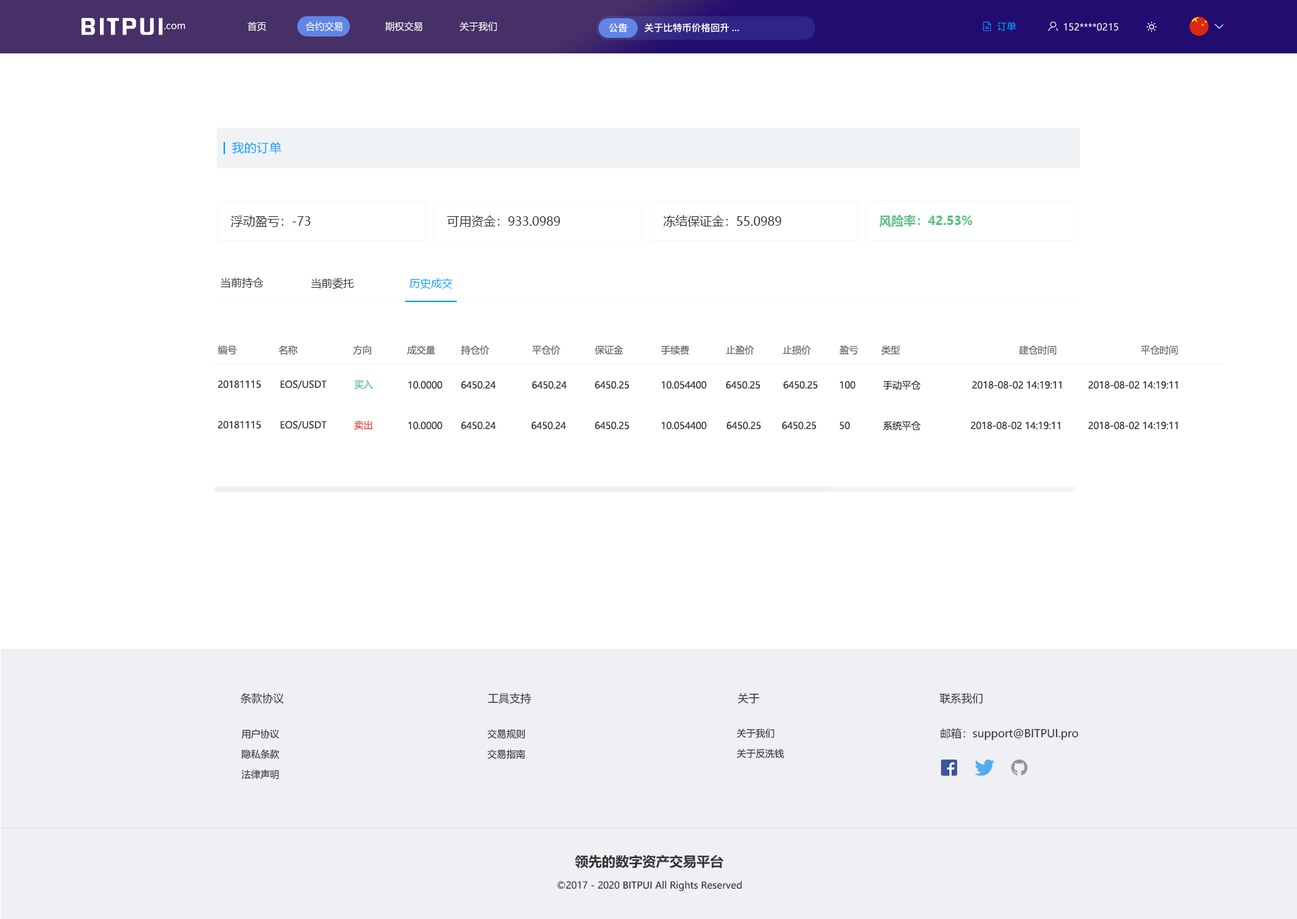
<style>
.page{position:relative;width:1297px;height:919px;background:#ffffff}
.page>*{position:absolute;margin:0}
.t1{font:20.7px "FZHZGBJW--GB1-0";letter-spacing:0.1em;color:#ffffff;scale:1.14 1}
.t2{font:9.5px "MicrosoftYaHei";color:#ffffff}
.t3{font:9.5px "PingFang-SC-Bold";color:#ffffff}
.t4{font:9.5px "MicrosoftYaHei";color:#009dfa}
.t5{font:12.2px "MicrosoftYaHei";letter-spacing:0.03em;color:#009dfa}
.t6{font:12.2px "MicrosoftYaHei";color:#333333}
.t7{font:12.2px "MicrosoftYaHei-Bold";color:#56c182}
.t8{font:10.8px "MicrosoftYaHei";color:#333333}
.t9{font:10.8px "MicrosoftYaHei";color:#009dfa}
.t10{font:9.5px "MicrosoftYaHei";letter-spacing:-0.01em;color:#666666}
.t11{font:9.5px "MicrosoftYaHei";letter-spacing:-0.01em;color:#333333}
.t12{font:9.5px "MicrosoftYaHei";letter-spacing:-0.01em;color:#56c182}
.t13{font:9.5px "MicrosoftYaHei";letter-spacing:-0.01em;color:#e74642}
.t14{font:9.5px/20.3px "MicrosoftYaHei";color:#333333}
.t15{font:13.5px "MicrosoftYaHei-Bold";color:#333333}
.t16{font:9.5px "MicrosoftYaHei";color:#333333}
</style>
<div class="page">
<p class="t1" style="left:81px;top:18px;width:82px;height:17px">BITPUI</p>
<p class="t2" style="left:164px;top:24px;width:21px;height:6px">.com</p>
<p class="t2" style="left:247px;top:22px;width:250px;height:9px">首页              合约交易               期权交易             关于我们</p>
<p class="t3" style="left:609px;top:23px;width:19px;height:9px">公告</p>
<p class="t3" style="left:645px;top:23px;width:94px;height:9px">关于比特币价格回升...</p>
<p class="t4" style="left:997px;top:22px;width:19px;height:9px">订单</p>
<p class="t2" style="left:1064px;top:23px;width:55px;height:8px">152****0215</p>
<p class="t5" style="left:232px;top:142px;width:50px;height:12px">我的订单</p>
<p class="t6" style="left:231px;top:216px;width:80px;height:11px">浮动盈亏：-73</p>
<p class="t6" style="left:447px;top:216px;width:113px;height:11px">可用资金：933.0989</p>
<p class="t6" style="left:664px;top:215px;width:118px;height:12px">冻结保证金：55.0989</p>
<p class="t7" style="left:879px;top:215px;width:94px;height:12px">风险率：42.53%</p>
<p class="t8" style="left:220px;top:278px;width:44px;height:10px">当前持仓</p>
<p class="t8" style="left:311px;top:278px;width:43px;height:11px">当前委托</p>
<p class="t9" style="left:410px;top:278px;width:43px;height:11px">历史成交</p>
<p class="t10" style="left:218px;top:345px;width:19px;height:10px">编号</p>
<p class="t10" style="left:278px;top:345px;width:20px;height:10px">名称</p>
<p class="t10" style="left:353px;top:345px;width:19px;height:10px">方向</p>
<p class="t10" style="left:407px;top:345px;width:29px;height:10px">成交量</p>
<p class="t10" style="left:461px;top:345px;width:29px;height:10px">持仓价</p>
<p class="t10" style="left:533px;top:345px;width:28px;height:10px">平仓价</p>
<p class="t10" style="left:595px;top:345px;width:29px;height:10px">保证金</p>
<p class="t10" style="left:661px;top:345px;width:28px;height:10px">手续费</p>
<p class="t10" style="left:726px;top:345px;width:29px;height:10px">止盈价</p>
<p class="t10" style="left:783px;top:345px;width:29px;height:10px">止损价</p>
<p class="t10" style="left:839px;top:345px;width:20px;height:10px">盈亏</p>
<p class="t10" style="left:881px;top:345px;width:20px;height:10px">类型</p>
<p class="t10" style="left:1019px;top:345px;width:38px;height:10px">建仓时间</p>
<p class="t10" style="left:1141px;top:345px;width:38px;height:10px">平仓时间</p>
<p class="t11" style="left:218px;top:380px;width:43px;height:9px">20181115</p>
<p class="t11" style="left:280px;top:380px;width:47px;height:9px">EOS/USDT</p>
<p class="t12" style="left:354px;top:380px;width:19px;height:9px">买入</p>
<p class="t11" style="left:408px;top:381px;width:35px;height:8px">10.0000</p>
<p class="t11" style="left:462px;top:381px;width:34px;height:8px">6450.24</p>
<p class="t11" style="left:533px;top:381px;width:34px;height:8px">6450.24</p>
<p class="t11" style="left:595px;top:381px;width:34px;height:8px">6450.25</p>
<p class="t11" style="left:662px;top:381px;width:45px;height:8px">10.054400</p>
<p class="t11" style="left:726px;top:381px;width:34px;height:8px">6450.25</p>
<p class="t11" style="left:784px;top:381px;width:34px;height:8px">6450.25</p>
<p class="t11" style="left:840px;top:381px;width:16px;height:8px">100</p>
<p class="t11" style="left:883px;top:380px;width:38px;height:10px">手动平仓</p>
<p class="t11" style="left:972px;top:381px;width:90px;height:8px">2018-08-02 14:19:11</p>
<p class="t11" style="left:1089px;top:381px;width:90px;height:8px">2018-08-02 14:19:11</p>
<p class="t11" style="left:218px;top:421px;width:43px;height:8px">20181115</p>
<p class="t11" style="left:280px;top:421px;width:47px;height:9px">EOS/USDT</p>
<p class="t13" style="left:354px;top:420px;width:18px;height:10px">卖出</p>
<p class="t11" style="left:408px;top:422px;width:35px;height:8px">10.0000</p>
<p class="t11" style="left:462px;top:422px;width:34px;height:8px">6450.24</p>
<p class="t11" style="left:532px;top:422px;width:34px;height:8px">6450.24</p>
<p class="t11" style="left:595px;top:422px;width:34px;height:8px">6450.25</p>
<p class="t11" style="left:662px;top:422px;width:45px;height:8px">10.054400</p>
<p class="t11" style="left:727px;top:422px;width:34px;height:8px">6450.25</p>
<p class="t11" style="left:783px;top:422px;width:33px;height:8px">6450.25</p>
<p class="t11" style="left:840px;top:422px;width:10px;height:8px">50</p>
<p class="t11" style="left:883px;top:421px;width:38px;height:9px">系统平仓</p>
<p class="t11" style="left:971px;top:422px;width:90px;height:8px">2018-08-02 14:19:11</p>
<p class="t11" style="left:1089px;top:422px;width:90px;height:8px">2018-08-02 14:19:11</p>
<p class="t8" style="left:241px;top:693px;width:43px;height:10px">条款协议</p>
<p class="t8" style="left:488px;top:693px;width:43px;height:11px">工具支持</p>
<p class="t8" style="left:738px;top:693px;width:22px;height:10px">关于</p>
<p class="t8" style="left:940px;top:693px;width:43px;height:11px">联系我们</p>
<p class="t14" style="left:241px;top:729px;width:39px;height:50px;text-align:center">用户协议<br>隐私条款<br>法律声明</p>
<p class="t14" style="left:487px;top:729px;width:39px;height:30px">交易规则<br>交易指南</p>
<p class="t14" style="left:737px;top:728px;width:48px;height:30px">关于我们<br>关于反洗钱</p>
<p class="t8" style="left:941px;top:728px;width:138px;height:13px">邮箱：support@BITPUI.pro</p>
<p class="t15" style="left:575px;top:855px;width:149px;height:13px">领先的数字资产交易平台</p>
<p class="t16" style="left:558px;top:881px;width:184px;height:10px">©2017 - 2020 BITPUI All Rights Reserved</p>
</div>
